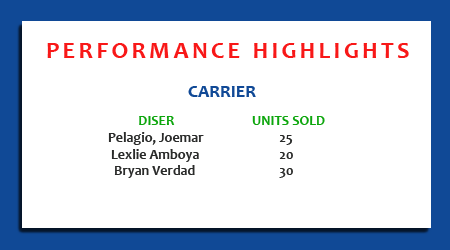
<style>
.page{position:relative;width:450px;height:250px;background:#ffffff}
.page>*{position:absolute;margin:0}
.t1{font:24px "Candara-Bold";letter-spacing:0.14em;color:#f81818;text-transform:uppercase}
.t2{font:18px "Candara-Bold";color:#104996}
.t3{font:14px "Candara-Bold";color:#2a2b2a}
.t4{font:14px "Candara-Bold";color:#0da60d}
</style>
<div class="page">
<p class="t1" style="left:47px;top:43px;width:362px;height:15px">performance highlights</p>
<p class="t2" style="left:188px;top:86px;width:68px;height:11px">CARRIER</p>
<p class="t3" style="left:108px;top:116px;width:217px;height:62px"><span class="t4">DISER   UNITS SOLD<br></span>Pelagio, Joemar           25<br> Lexlie Amboya           20<br>  Bryan Verdad           30</p>
</div>
